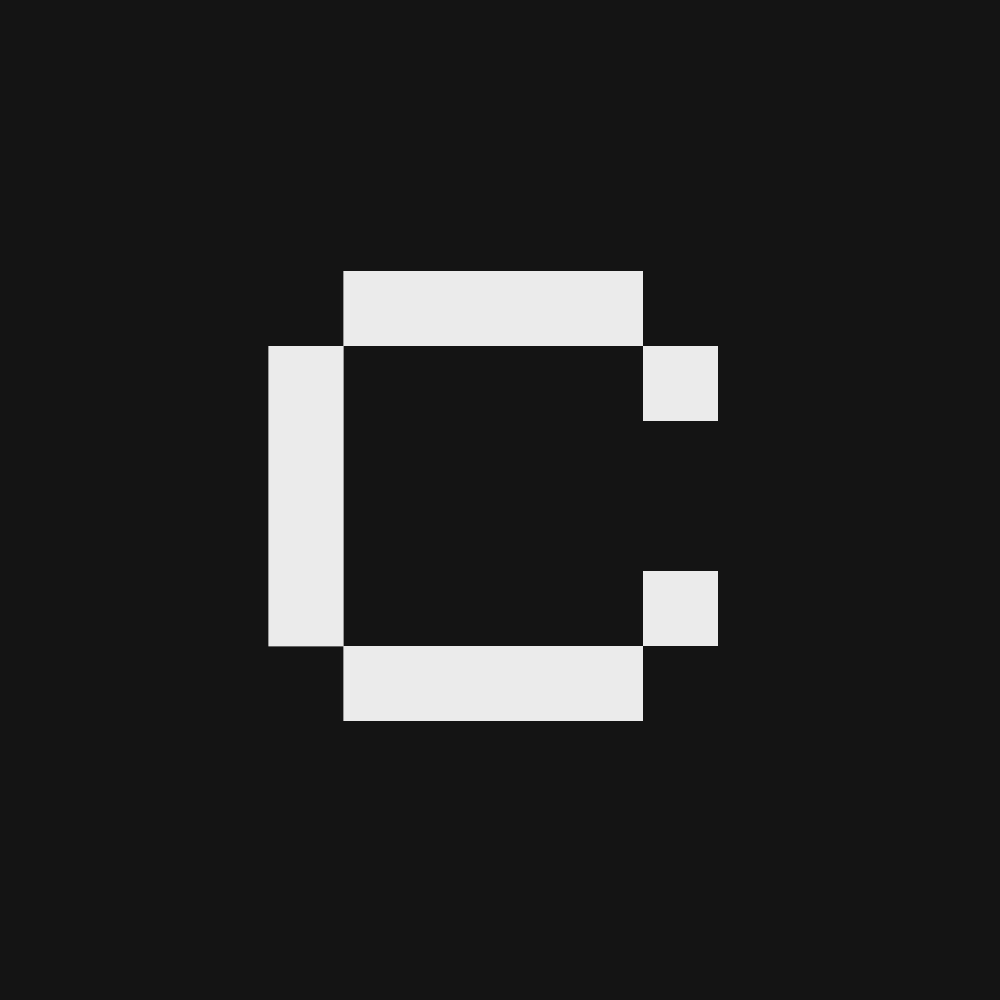
<style>
.page{position:relative;width:1000px;height:1000px;background:#141414}
.page>*{position:absolute;margin:0}
.t1{font:600px "Minecraft";letter-spacing:0.025em;color:#ebebeb}
.t2{font:80px "Minecraft";letter-spacing:0.025em;color:#ebebeb}
</style>
<div class="page">
<p class="t1" style="left:268px;top:271px;width:413px;height:450px"><span class="t2"><br></span>C</p>
</div>
